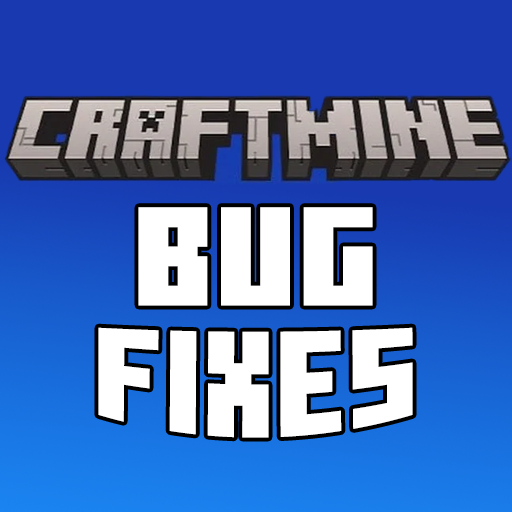
<style>
.page{position:relative;width:512px;height:512px;background:#1839b0}
.page>*{position:absolute;margin:0}
.t1{font:140px "MinecraftTen";color:#ffffff}
.t2{font:122px "MinecraftTen";color:#ffffff}
</style>
<div class="page">
<p class="t1" style="left:138px;top:207px;width:235px;height:99px">BUG</p>
<p class="t2" style="left:98px;top:327px;width:315px;height:111px">FIXES</p>
</div>
